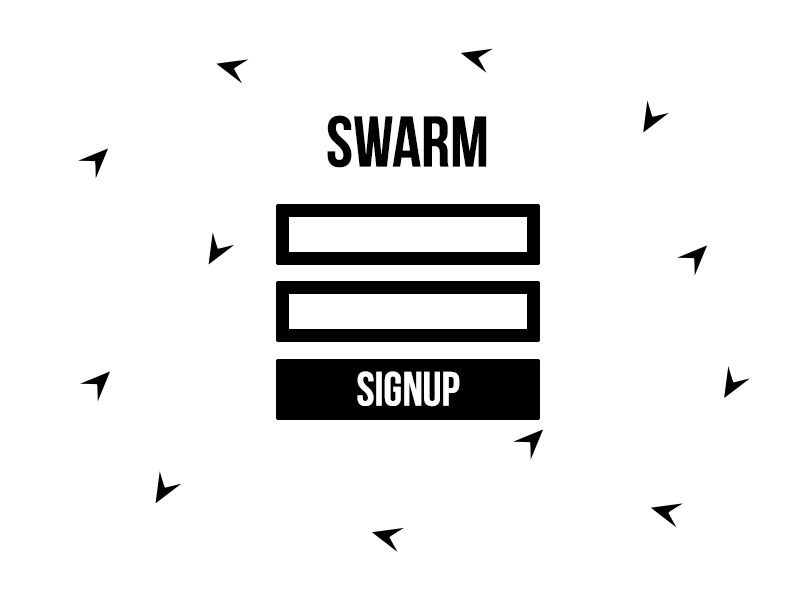
<style>
.page{position:relative;width:800px;height:600px;background:#ffffff}
.page>*{position:absolute;margin:0}
.t1{font:72px "BebasNeue";color:#000000}
.t2{font:48px "BebasNeue";color:#ffffff}
</style>
<div class="page">
<p class="t1" style="left:327px;top:115px;width:160px;height:53px">swarm</p>
<p class="t2" style="left:357px;top:371px;width:103px;height:36px">Signup</p>
</div>
